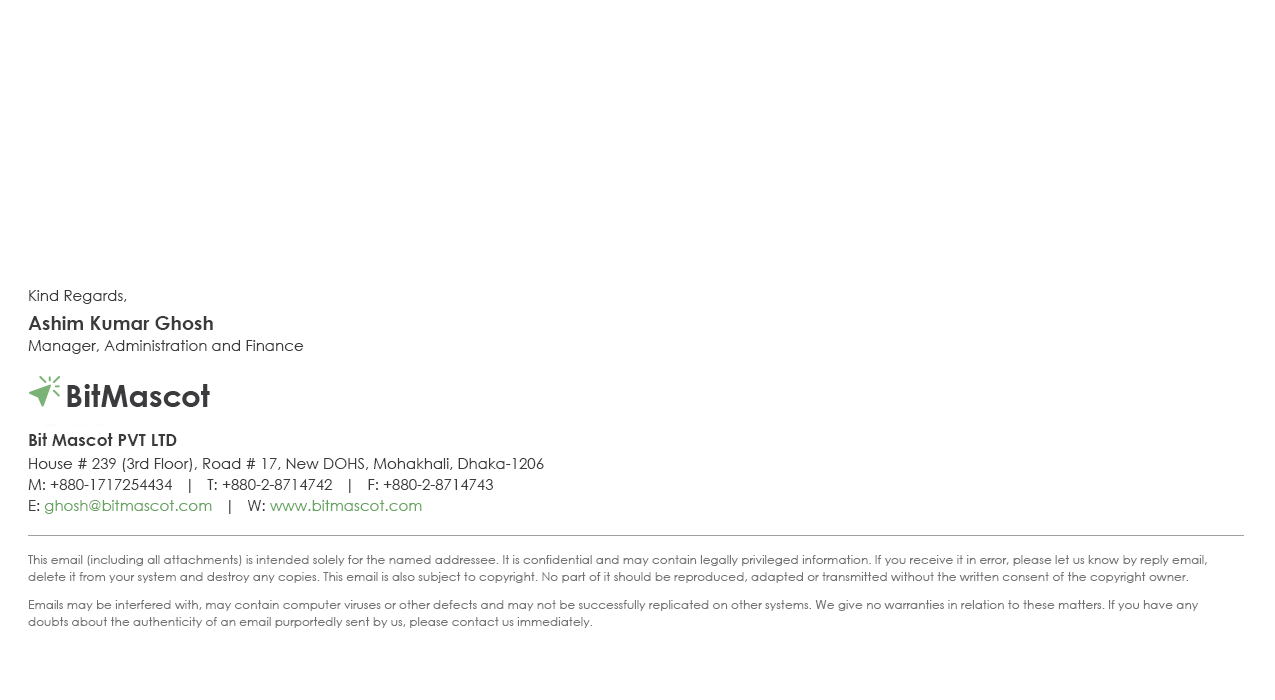
<style>
.page{position:relative;width:1275px;height:700px;background:#ffffff}
.page>*{position:absolute;margin:0}
.t1{font:15px/21px "CenturyGothic";color:#3b3b3d}
.t2{font:15px/25px "CenturyGothic";color:#3b3b3d}
.t3{font:19px/29px "CenturyGothic-Bold";color:#3b3b3d}
.t4{font:17px/21px "CenturyGothic-Bold";color:#3b3b3d}
.t5{font:15px/23px "CenturyGothic";color:#3b3b3d}
.t6{font:15px/21px "CenturyGothic";color:#65a35f}
.t7{font:12px/17px "CenturyGothic";color:#737373}
</style>
<div class="page">
<p class="t1" style="left:28px;top:290px;width:276px;height:64px"><span class="t2">Kind Regards,<br></span><span class="t3">Ashim Kumar Ghosh<br></span>Manager, Administration and Finance</p>
<p class="t1" style="left:28px;top:433px;width:516px;height:81px"><span class="t4">Bit Mascot PVT LTD<br></span><span class="t5">House # 239 (3rd Floor), Road # 17, New DOHS, Mohakhali, Dhaka-1206<br></span>M: +880-1717254434   |   T: +880-2-8714742   |   F: +880-2-8714743 <br>E: <span class="t6">ghosh@bitmascot.com   </span>|   W: <span class="t6">www.bitmascot.com</span></p>
<p class="t7" style="left:28px;top:555px;width:1179px;height:73px">This email (including all attachments) is intended solely for the named addressee. It is confidential and may contain legally privileged information. If you receive it in error, please let us know by reply email, delete it from your system and destroy any copies. This email is also subject to copyright. No part of it should be reproduced, adapted or transmitted without the written consent of the copyright owner.<br><br>Emails may be interfered with, may contain computer viruses or other defects and may not be successfully replicated on other systems. We give no warranties in relation to these matters. If you have any doubts about the authenticity of an email purportedly sent by us, please contact us immediately.</p>
</div>
